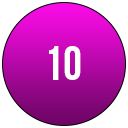
<style>
.page{position:relative;width:128px;height:128px;background:#ffffff}
.page>*{position:absolute;margin:0}
.t1{font:48px "BebasNeue";color:#ffffff}
</style>
<div class="page">
<p class="t1" style="left:49px;top:46px;width:32px;height:34px">10</p>
</div>
